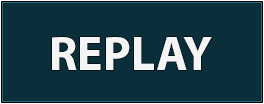
<style>
.page{position:relative;width:264px;height:104px;background:#0a2e3a}
.page>*{position:absolute;margin:0}
.t1{font:48px "MyriadHebrew-Bold";color:#f4f4f4}
</style>
<div class="page">
<p class="t1" style="left:52px;top:37px;width:160px;height:33px">REPLAY</p>
</div>
